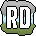
<style>
.page{position:relative;width:36px;height:36px;background:#fefefe}
.page>*{position:absolute;margin:0}
.t1{font:28px "BigNoodleTitling";letter-spacing:0.02em;color:#fefefe;font-weight:bold}
.t2{font:28px "BigNoodleTitling";color:#fefefe;font-weight:bold}
</style>
<div class="page">
<p class="t1" style="left:7px;top:7px;width:23px;height:21px">R<span class="t2">D</span></p>
</div>
